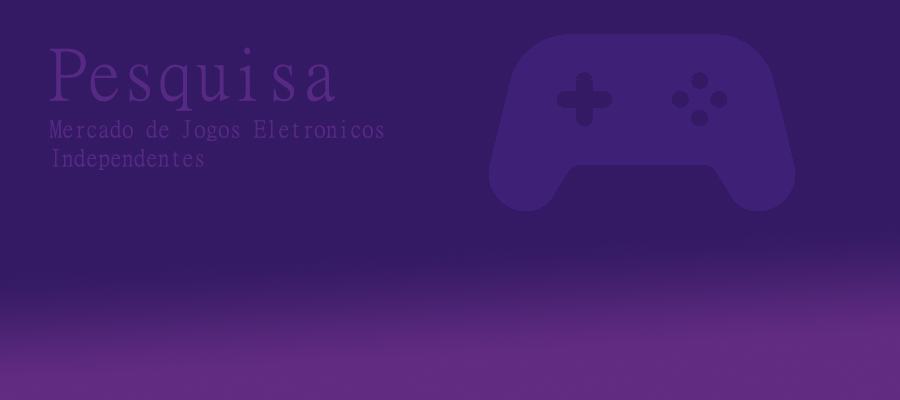
<style>
.page{position:relative;width:900px;height:400px;background:#341a65}
.page>*{position:absolute;margin:0}
.t1{font:72px "MingLiU-ExtB";color:#562985}
.t2{font:72px "MingLiU-ExtB";color:#4a2373}
.t3{font:24px "MingLiU-ExtB";color:#562985}
</style>
<div class="page">
<p class="t1" style="left:49px;top:47px;width:286px;height:64px">Pesquisa<br><span class="t2"><br>S</span></p>
<p class="t3" style="left:49px;top:119px;width:335px;height:51px">Mercado de Jogos Eletronicos<br>Independentes</p>
</div>
